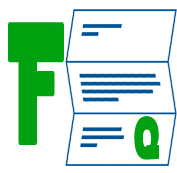
<style>
.page{position:relative;width:177px;height:173px;background:#ffffff}
.page>*{position:absolute;margin:0}
.t1{font:167.2px "StarJediLogoMonoLine";color:#01a211;font-weight:bold;scale:0.43 1}
.t2{font:57.5px "StarJediLogoMonoLine";color:#01a211;font-weight:bold;scale:0.52 1}
</style>
<div class="page">
<p class="t1" style="left:8px;top:22px;width:56px;height:123px">F</p>
<p class="t2" style="left:134px;top:116px;width:25px;height:44px">q</p>
</div>
